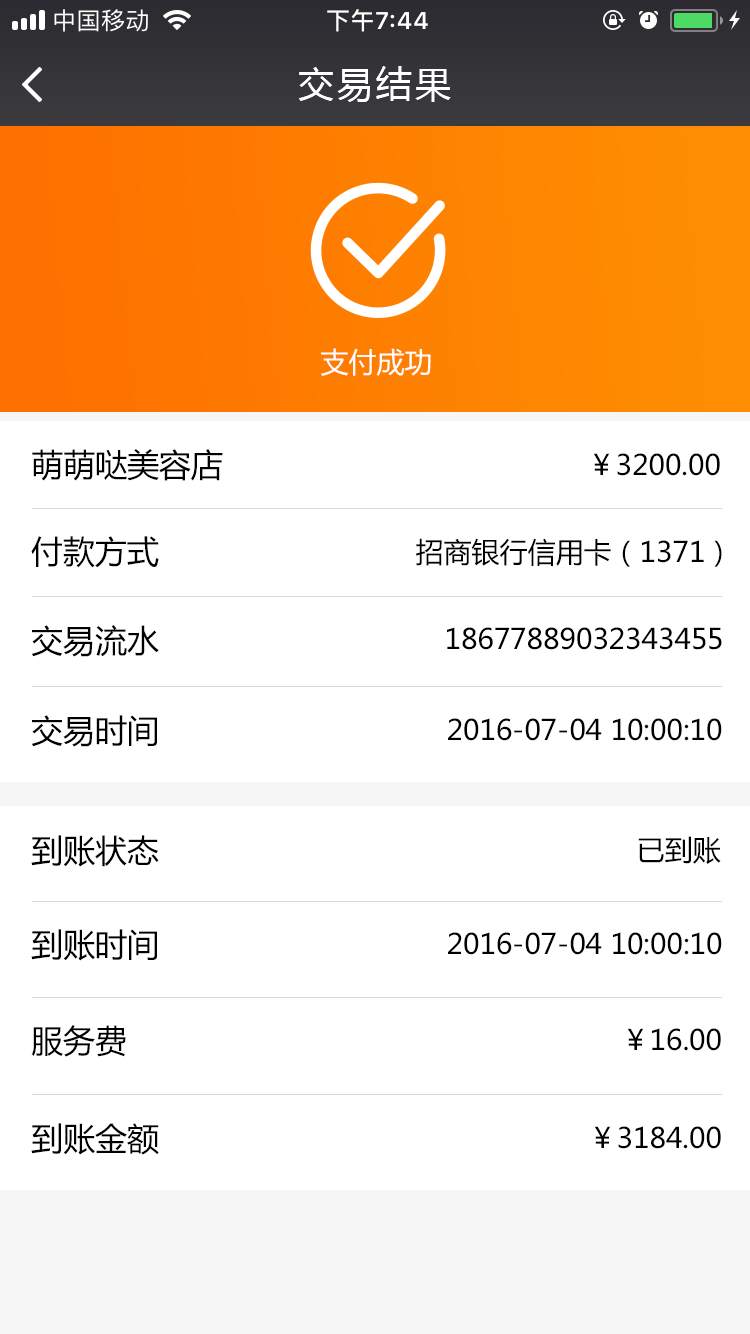
<style>
.page{position:relative;width:750px;height:1334px;background:#ffffff}
.page>*{position:absolute;margin:0}
.t1{font:36px "MicrosoftYaHei";letter-spacing:0.08em;color:#ffffff}
.t2{font:28px "MicrosoftYaHei";color:#ffffff}
.t3{font:32px "MicrosoftYaHei";color:#000000}
.t4{font:28px "MicrosoftYaHei";color:#000000}
</style>
<div class="page">
<p class="t1" style="left:298px;top:66px;width:153px;height:36px">交易结果</p>
<p class="t2" style="left:321px;top:348px;width:110px;height:28px">支付成功</p>
<p class="t3" style="left:32px;top:449px;width:191px;height:32px">萌萌哒美容店</p>
<p class="t4" style="left:593px;top:453px;width:127px;height:23px">￥3200.00</p>
<p class="t3" style="left:31px;top:536px;width:128px;height:32px">付款方式</p>
<p class="t4" style="left:416px;top:538px;width:306px;height:29px">招商银行信用卡（1371）</p>
<p class="t3" style="left:31px;top:625px;width:128px;height:32px">交易流水</p>
<p class="t4" style="left:447px;top:627px;width:275px;height:23px">18677889032343455</p>
<p class="t3" style="left:31px;top:715px;width:126px;height:32px">交易时间</p>
<p class="t4" style="left:448px;top:718px;width:274px;height:23px">2016-07-04 10:00:10</p>
<p class="t3" style="left:31px;top:835px;width:128px;height:32px">到账状态</p>
<p class="t4" style="left:638px;top:836px;width:83px;height:28px">已到账</p>
<p class="t3" style="left:31px;top:929px;width:126px;height:32px">到账时间</p>
<p class="t4" style="left:448px;top:932px;width:274px;height:23px">2016-07-04 10:00:10</p>
<p class="t3" style="left:31px;top:1025px;width:95px;height:32px">服务费</p>
<p class="t4" style="left:627px;top:1028px;width:94px;height:23px">￥16.00</p>
<p class="t3" style="left:31px;top:1123px;width:128px;height:32px">到账金额</p>
<p class="t4" style="left:594px;top:1126px;width:127px;height:23px">￥3184.00</p>
</div>
